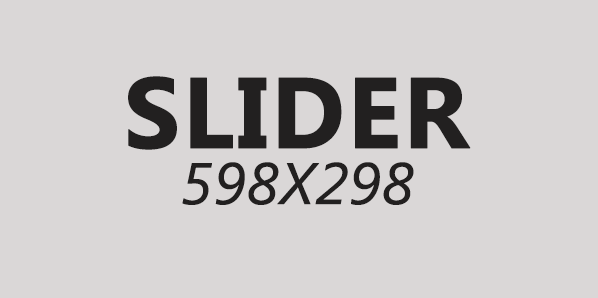
<style>
.page{position:relative;width:598px;height:298px;background:#dad7d7}
.page>*{position:absolute;margin:0}
.t1{font:100px "SegoeUI-Bold";color:#222020;text-transform:uppercase;font-weight:bold}
.t2{font:58.3px "SegoeUI-Italic";color:#222020;text-transform:uppercase;font-weight:bold}
</style>
<div class="page">
<p class="t1" style="left:128px;top:76px;width:343px;height:74px">SLIDER</p>
<p class="t2" style="left:182px;top:162px;width:232px;height:43px">598x298</p>
</div>
